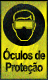
<style>
.page{position:relative;width:48px;height:80px}
.page>*{position:absolute;margin:0}
.t1{font:12.4px/12px "Arial-BoldMT";letter-spacing:-0.06em;scale:0.79 1}
</style>
<div class="page">
<p class="t1" style="left:3px;top:48px;width:43px;height:27px;text-align:center">Óculos de<br>Proteção</p>
</div>
